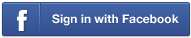
<style>
.page{position:relative;width:191px;height:38px}
.page>*{position:absolute;margin:0}
.t1{font:12px "HelveticaNeue-Bold";color:#ffffff}
</style>
<div class="page">
<p class="t1" style="left:52px;top:14px;width:127px;height:12px">Sign in with Facebook</p>
</div>
